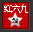
<style>
.page{position:relative;width:33px;height:32px;background:#c50000}
.page>*{position:absolute;margin:0}
.t1{font:10.4px "SimSun";letter-spacing:-0.25em;color:#ffffff}
</style>
<div class="page">
<p class="t1" style="left:4px;top:4px;width:24px;height:9px">红六九</p>
</div>
